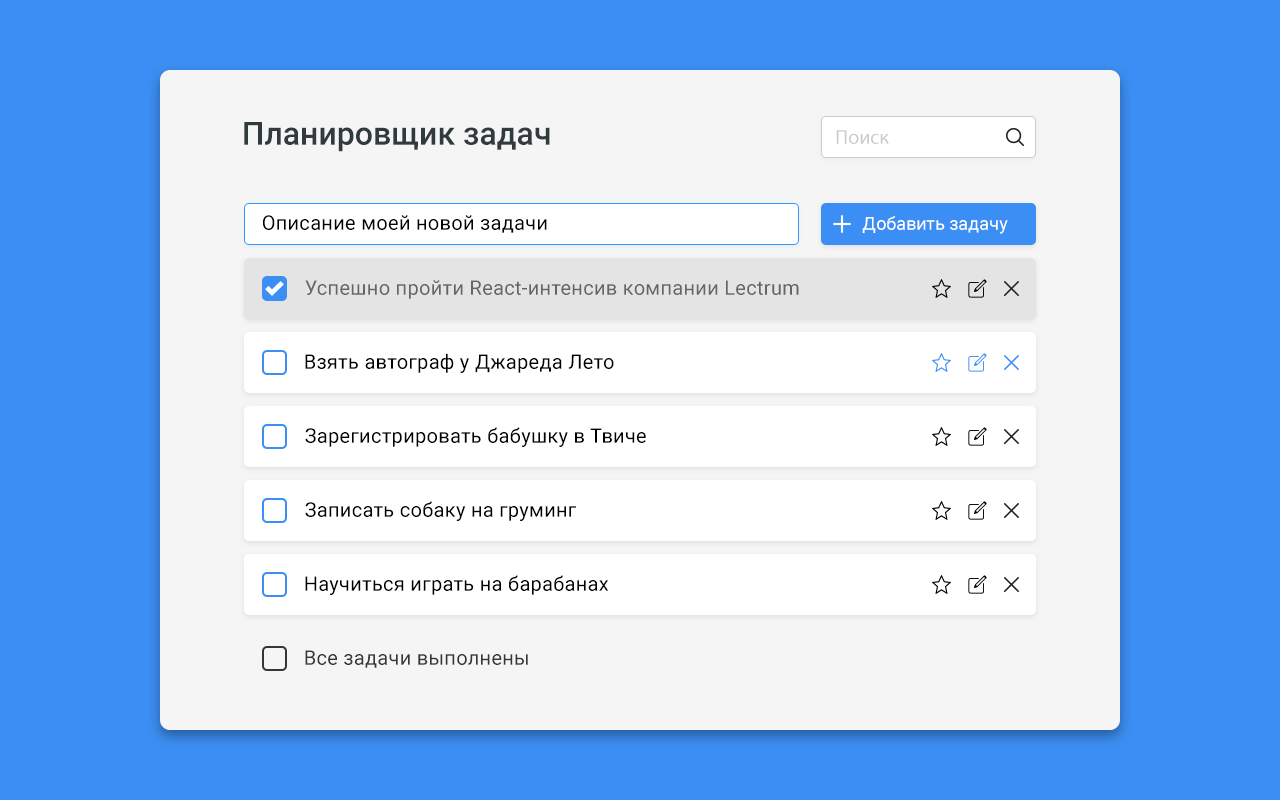
<style>
.page{position:relative;width:1280px;height:800px;background:#3b8ef3}
.page>*{position:absolute;margin:0}
.t1{font:32px "Roboto-Medium";color:#313b3d}
.t2{font:20px "MyriadPro-Regular";color:#cccccc}
.t3{font:20px "Roboto-Regular";letter-spacing:0.015em;color:#000000}
.t4{font:18px "Roboto-Regular";color:#ffffff}
.t5{font:20px "Roboto-Regular";letter-spacing:0.015em;color:#656565}
.t6{font:20px "Roboto-Regular";letter-spacing:0.015em;color:#000101}
.t7{font:20px "Roboto-Regular";letter-spacing:0.015em;color:#363636}
</style>
<div class="page">
<p class="t1" style="left:244px;top:122px;width:306px;height:30px">Планировщик задач</p>
<p class="t2" style="left:836px;top:130px;width:53px;height:14px">Поиск</p>
<p class="t3" style="left:263px;top:215px;width:284px;height:18px">Описание моей новой задачи</p>
<p class="t4" style="left:862px;top:216px;width:146px;height:18px">Добавить задачу</p>
<p class="t5" style="left:305px;top:280px;width:494px;height:19px">Успешно пройти React-интенсив компании Lectrum</p>
<p class="t3" style="left:305px;top:353px;width:309px;height:20px">Взять автограф у Джареда Лето</p>
<p class="t3" style="left:305px;top:427px;width:341px;height:20px">Зарегистрировать бабушку в Твиче</p>
<p class="t6" style="left:305px;top:501px;width:271px;height:20px">Записать собаку на груминг</p>
<p class="t3" style="left:305px;top:575px;width:304px;height:20px">Научиться играть на барабанах</p>
<p class="t7" style="left:305px;top:650px;width:223px;height:18px">Все задачи выполнены</p>
</div>
